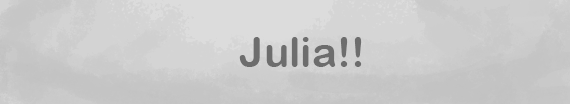
<style>
.page{position:relative;width:570px;height:104px}
.page>*{position:absolute;margin:0}
.t1{font:42.1px "ArialRoundedMTBold";color:#6d6d6d}
</style>
<div class="page">
<p class="t1" style="left:239px;top:37px;width:123px;height:30px">Julia!!</p>
</div>
